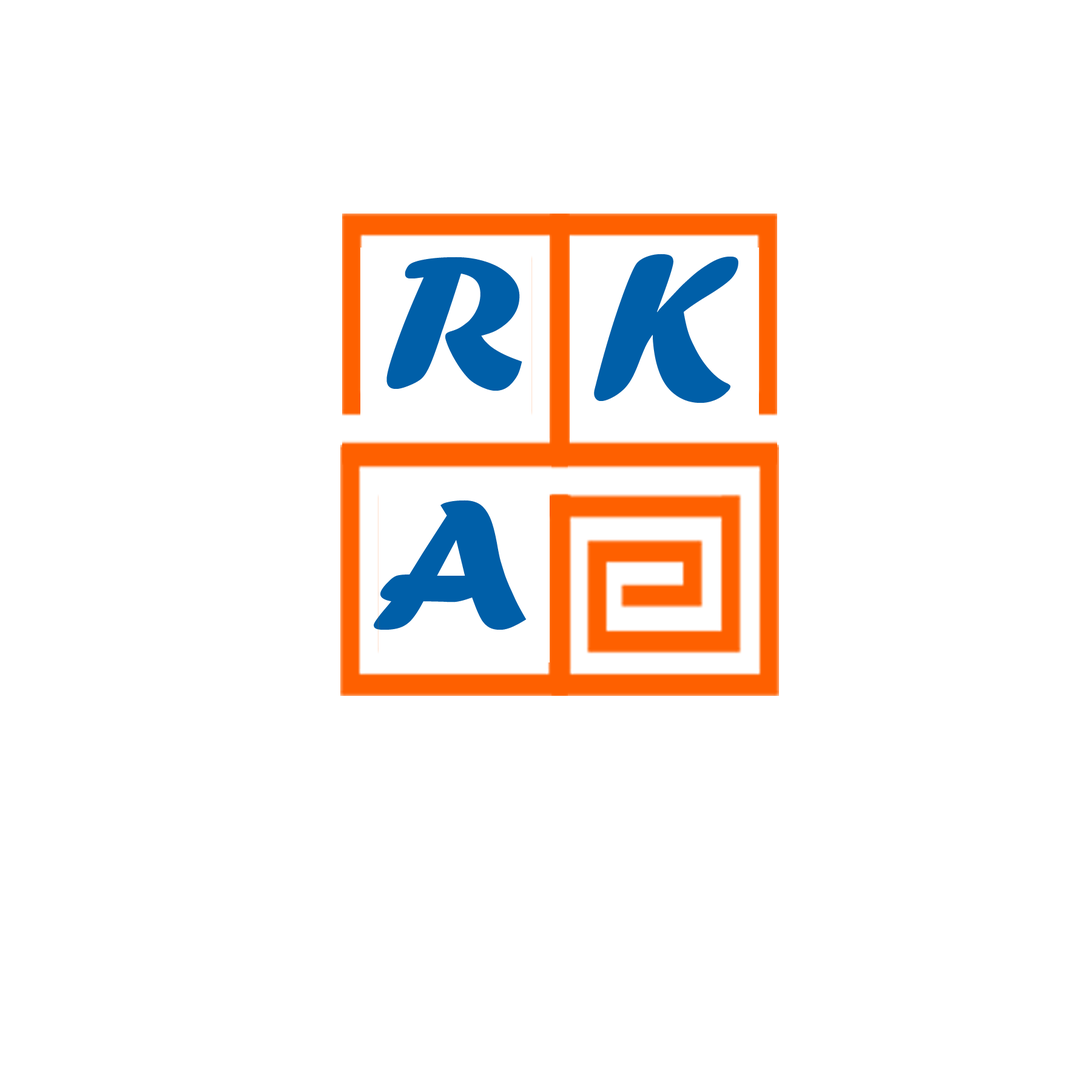
<style>
.page{position:relative;width:1092px;height:1092px;background:#ffffff}
.page>*{position:absolute;margin:0}
.t1{font:203.4px "ForteMT";color:#005fa8;scale:1.14 1}
.t2{font:217.7px "ForteMT";color:#005fa8}
.t3{font:191.7px "ForteMT";color:#005fa8;scale:1.12 1}
</style>
<div class="page">
<p class="t1" style="left:386px;top:257px;width:136px;height:134px">R</p>
<p class="t2" style="left:594px;top:254px;width:144px;height:149px">K</p>
<p class="t3" style="left:374px;top:500px;width:153px;height:130px">A</p>
</div>
